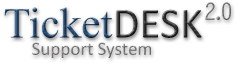
<style>
.page{position:relative;width:240px;height:65px;background:#ffffff}
.page>*{position:absolute;margin:0}
.t1{font:23.8px "LetterGothicStd-Bold";letter-spacing:-0.225em;color:#474444;scale:0.91 1}
.t2{font:43.3px "TimesNewRomanPSMT";color:#214973}
.t3{font:43.3px "Calibri";color:#302f2f}
.t4{font:19px "Calibri";color:#474444}
</style>
<div class="page">
<p class="t1" style="left:205px;top:2px;width:26px;height:18px;opacity:0.75">2.0</p>
<p class="t2" style="left:4px;top:7px;width:198px;height:31px">Ticket<span class="t3">DESK</span></p>
<p class="t4" style="left:32px;top:42px;width:119px;height:16px;opacity:0.75">Support System</p>
</div>
